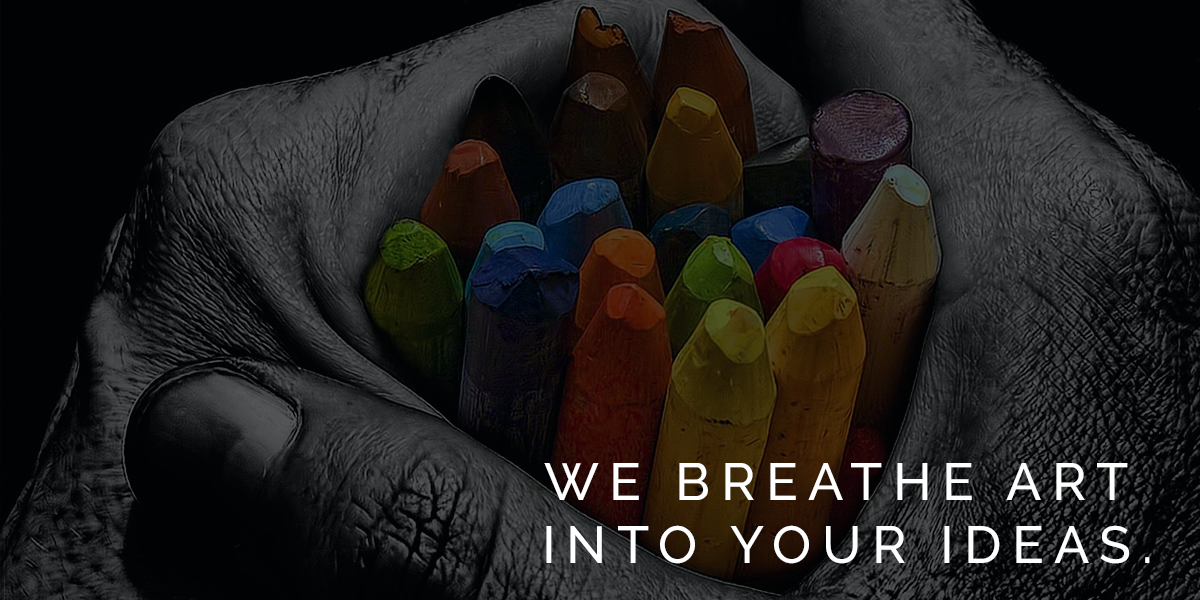
<style>
.page{position:relative;width:1200px;height:600px}
.page>*{position:absolute;margin:0}
.t1{font:51.9px "Raleway-Medium";letter-spacing:0.2em;color:#ffffff}
</style>
<div class="page">
<p class="t1" style="left:544px;top:463px;width:606px;height:101px;text-align:center">WE BREATHE ART <br>INTO YOUR IDEAS.</p>
</div>
